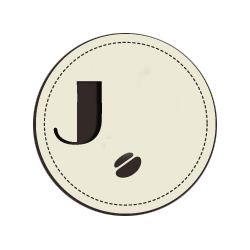
<style>
.page{position:relative;width:250px;height:250px;background:#ffffff}
.page>*{position:absolute;margin:0}
.t1{font:92.8px "Broadway";color:#332927;text-transform:uppercase;scale:0.91 1}
</style>
<div class="page">
<p class="t1" style="left:53px;top:81px;width:49px;height:64px">J</p>
</div>
